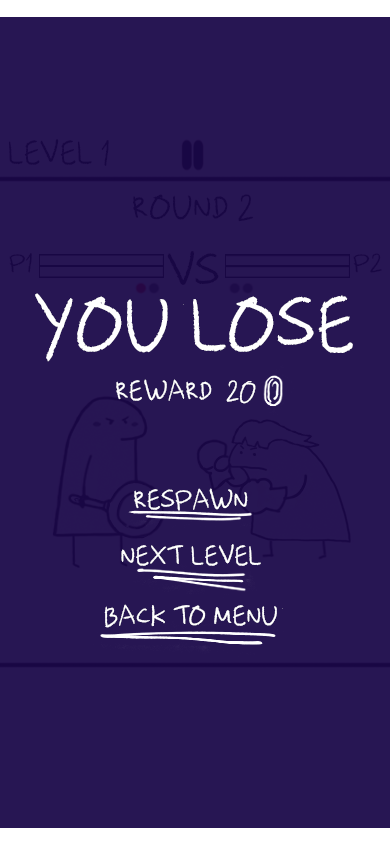
<style>
.page{position:relative;width:390px;height:844px;background:#271653}
.page>*{position:absolute;margin:0}
.t1{font:36px "LTColoredPencil";letter-spacing:0.025em;color:#180744}
.t2{font:37.8px "LTColoredPencil";letter-spacing:0.025em;color:#180744}
.t3{font:26.7px "LTColoredPencil";letter-spacing:0.025em;color:#180744;scale:1.09 1}
.t4{font:53.4px "LTColoredPencil";letter-spacing:0.025em;color:#180744}
.t5{font:26.6px "LTColoredPencil";letter-spacing:0.025em;color:#180744;scale:1.11 1}
.t6{font:83.5px "LTColoredPencil";letter-spacing:0.025em;color:#ffffff}
.t7{font:30px "LTColoredPencil";letter-spacing:0.025em;color:#ffffff}
.t8{font:30px/4.6px "LTColoredPencil";letter-spacing:0.025em;color:#ffffff}
</style>
<div class="page">
<p class="t1" style="left:8px;top:139px;width:101px;height:27px">LEVEL 1</p>
<p class="t2" style="left:133px;top:194px;width:121px;height:28px">ROUND 2</p>
<p class="t3" style="left:9px;top:253px;width:23px;height:20px">P1</p>
<p class="t4" style="left:167px;top:251px;width:52px;height:34px">VS</p>
<p class="t5" style="left:353px;top:253px;width:29px;height:20px">P2</p>
<p class="t6" style="left:35px;top:293px;width:318px;height:69px">YOU LOSE</p>
<p class="t7" style="left:116px;top:379px;width:140px;height:25px">REWARD  20</p>
<p class="t8" style="left:104px;top:488px;width:179px;height:140px;text-align:center">RESPAWN<br><br><br><br><br><br><br><br><br><br><br><br>NEXT LEVEL<br><br><br><br><br><br><br><br><br><br><br><br><br>BACK TO MENU</p>
</div>
